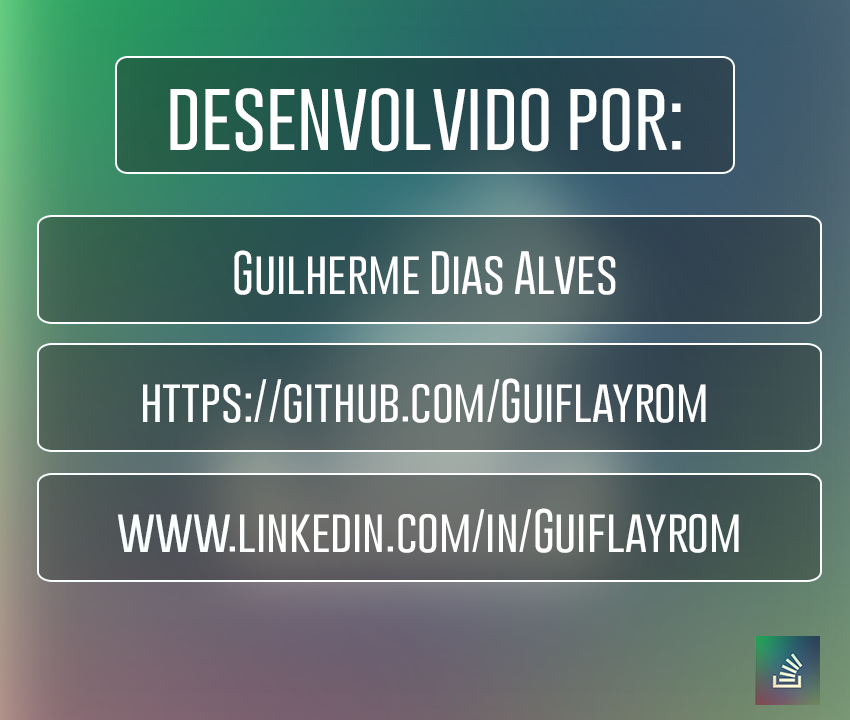
<style>
.page{position:relative;width:850px;height:720px}
.page>*{position:absolute;margin:0}
.t1{font:72.2px "GoboldThinLight";color:#ffffff}
.t2{font:44.5px "GoboldThinLight";color:#ffffff}
</style>
<div class="page">
<p class="t1" style="left:170px;top:88px;width:511px;height:64px">desenvolvido por:</p>
<p class="t2" style="left:234px;top:250px;width:382px;height:45px">Guilherme Dias Alves</p>
<p class="t2" style="left:143px;top:378px;width:563px;height:45px">https://github.com/Guiflayrom</p>
<p class="t2" style="left:118px;top:508px;width:621px;height:45px">www.linkedin.com/in/Guiflayrom</p>
</div>
